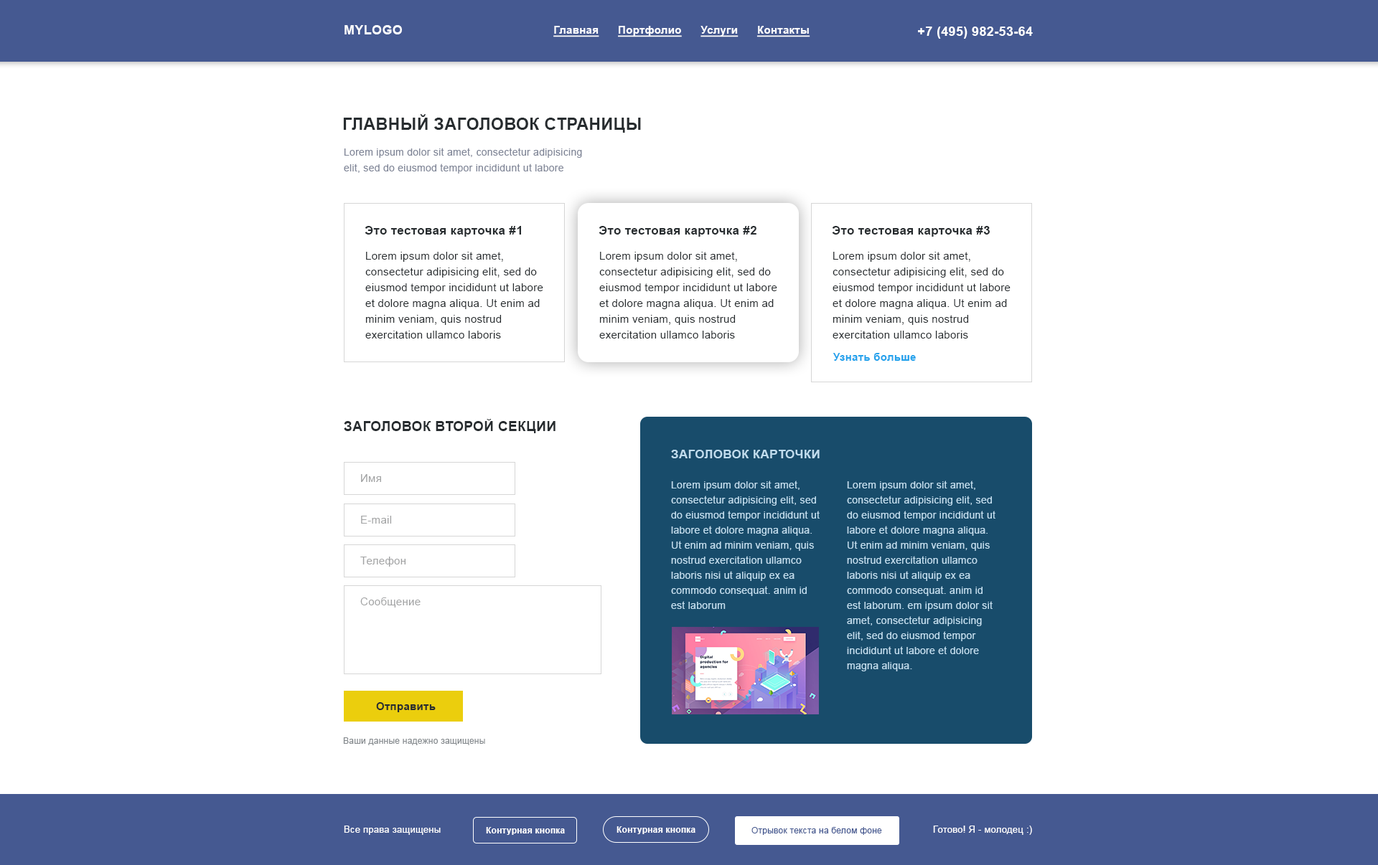
<style>
.page{position:relative;width:1378px;height:865px;background:#ffffff}
.page>*{position:absolute;margin:0}
.t1{font:12.9px "Arial-BoldMT";letter-spacing:0.02em;color:#ffffff}
.t2{font:10.8px "Arial-BoldMT";letter-spacing:0.02em;color:#ffffff;text-decoration:underline}
.t3{font:16.5px "Arial-BoldMT";letter-spacing:0.02em;color:#272c2f;text-transform:uppercase}
.t4{font:10px/15.8px "ArialMT";letter-spacing:0.02em;color:#828899}
.t5{font:12.2px "Arial-BoldMT";letter-spacing:0.02em;color:#272c2f}
.t6{font:10.8px/15.8px "ArialMT";letter-spacing:0.02em;color:#272c2f}
.t7{font:10.8px "Arial-BoldMT";letter-spacing:0.02em;color:#22a2ec}
.t8{font:13.6px "Arial-BoldMT";letter-spacing:0.02em;color:#272c2f;text-transform:uppercase}
.t9{font:12.2px "Arial-BoldMT";letter-spacing:0.02em;color:#c0ddee;text-transform:uppercase}
.t10{font:10.8px "ArialMT";letter-spacing:0.02em;color:#a2a3a4}
.t11{font:10px/15.1px "ArialMT";letter-spacing:0.02em;color:#c0ddee}
.t12{font:10.8px "Arial-BoldMT";letter-spacing:0.02em;color:#272c2f}
.t13{font:8.6px "ArialMT";letter-spacing:0.02em;color:#84898d}
.t14{font:9.3px "ArialMT";letter-spacing:0.02em;color:#ffffff}
.t15{font:8.6px "Arial-BoldMT";letter-spacing:0.02em;color:#ffffff}
.t16{font:8.6px "ArialMT";letter-spacing:0.02em;color:#455991}
</style>
<div class="page">
<p class="t1" style="left:344px;top:25px;width:58px;height:9px">MYLOGO</p>
<p class="t2" style="left:553px;top:26px;width:257px;height:11px">Главная      Портфолио      Услуги      Контакты</p>
<p class="t1" style="left:918px;top:27px;width:115px;height:12px">+7 (495) 982-53-64</p>
<p class="t3" style="left:343px;top:114px;width:298px;height:19px">Главный заголовок страницы</p>
<p class="t4" style="left:344px;top:148px;width:238px;height:26px">Lorem ipsum dolor sit amet, consectetur adipisicing elit, sed do eiusmod tempor incididunt ut labore</p>
<p class="t5" style="left:365px;top:226px;width:156px;height:11px">Это тестовая карточка #1</p>
<p class="t5" style="left:598px;top:226px;width:158px;height:11px">Это тестовая карточка #2</p>
<p class="t5" style="left:832px;top:226px;width:158px;height:11px">Это тестовая карточка #3</p>
<p class="t6" style="left:365px;top:252px;width:178px;height:87px">Lorem ipsum dolor sit amet, consectetur adipisicing elit, sed do eiusmod tempor incididunt ut labore et dolore magna aliqua. Ut enim ad minim veniam, quis nostrud exercitation ullamco laboris</p>
<p class="t6" style="left:599px;top:252px;width:178px;height:87px">Lorem ipsum dolor sit amet, consectetur adipisicing elit, sed do eiusmod tempor incididunt ut labore et dolore magna aliqua. Ut enim ad minim veniam, quis nostrud exercitation ullamco laboris</p>
<p class="t6" style="left:832px;top:252px;width:178px;height:87px">Lorem ipsum dolor sit amet, consectetur adipisicing elit, sed do eiusmod tempor incididunt ut labore et dolore magna aliqua. Ut enim ad minim veniam, quis nostrud exercitation ullamco laboris</p>
<p class="t7" style="left:832px;top:353px;width:84px;height:8px">Узнать больше</p>
<p class="t8" style="left:344px;top:419px;width:211px;height:14px">Заголовок второй секции</p>
<p class="t9" style="left:671px;top:450px;width:149px;height:9px">Заголовок карточки</p>
<p class="t10" style="left:361px;top:474px;width:20px;height:8px">Имя</p>
<p class="t11" style="left:671px;top:481px;width:149px;height:128px">Lorem ipsum dolor sit amet, consectetur adipisicing elit, sed do eiusmod tempor incididunt ut labore et dolore magna aliqua. Ut enim ad minim veniam, quis nostrud exercitation ullamco laboris nisi ut aliquip ex ea commodo consequat. anim id est laborum</p>
<p class="t11" style="left:847px;top:481px;width:148px;height:191px">Lorem ipsum dolor sit amet, consectetur adipisicing elit, sed do eiusmod tempor incididunt ut labore et dolore magna aliqua. Ut enim ad minim veniam, quis nostrud exercitation ullamco laboris nisi ut aliquip ex ea commodo consequat. anim id est laborum. em ipsum dolor sit amet, consectetur adipisicing elit, sed do eiusmod tempor incididunt ut labore et dolore magna aliqua.</p>
<p class="t10" style="left:361px;top:516px;width:31px;height:8px">E-mail</p>
<p class="t10" style="left:360px;top:557px;width:46px;height:10px">Телефон</p>
<p class="t10" style="left:360px;top:598px;width:61px;height:10px">Сообщение</p>
<p class="t12" style="left:376px;top:703px;width:60px;height:10px">Отправить</p>
<p class="t13" style="left:343px;top:738px;width:142px;height:8px">Ваши данные надежно защищены</p>
<p class="t14" style="left:344px;top:826px;width:97px;height:9px">Все права защищены</p>
<p class="t15" style="left:486px;top:827px;width:79px;height:8px">Контурная кнопка</p>
<p class="t15" style="left:616px;top:827px;width:79px;height:8px">Контурная кнопка</p>
<p class="t16" style="left:751px;top:827px;width:131px;height:8px">Отрывок текста на белом фоне</p>
<p class="t14" style="left:933px;top:826px;width:99px;height:9px">Готово! Я - молодец :)</p>
</div>
